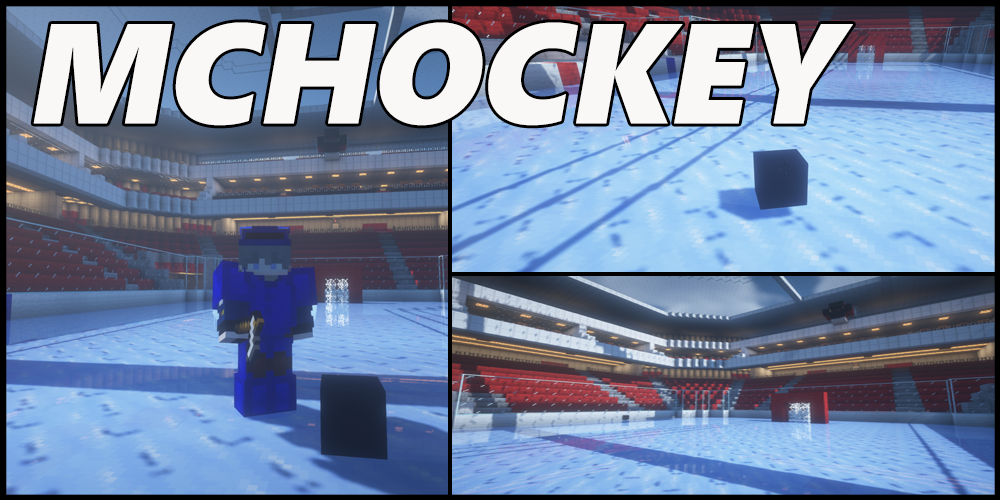
<style>
.page{position:relative;width:1000px;height:500px}
.page>*{position:absolute;margin:0}
.t1{font:141.7px "SegoeUIBlack";color:#faf7f7;font-style:italic}
</style>
<div class="page">
<p class="t1" style="left:33px;top:22px;width:820px;height:104px">MCHOCKEY</p>
</div>
